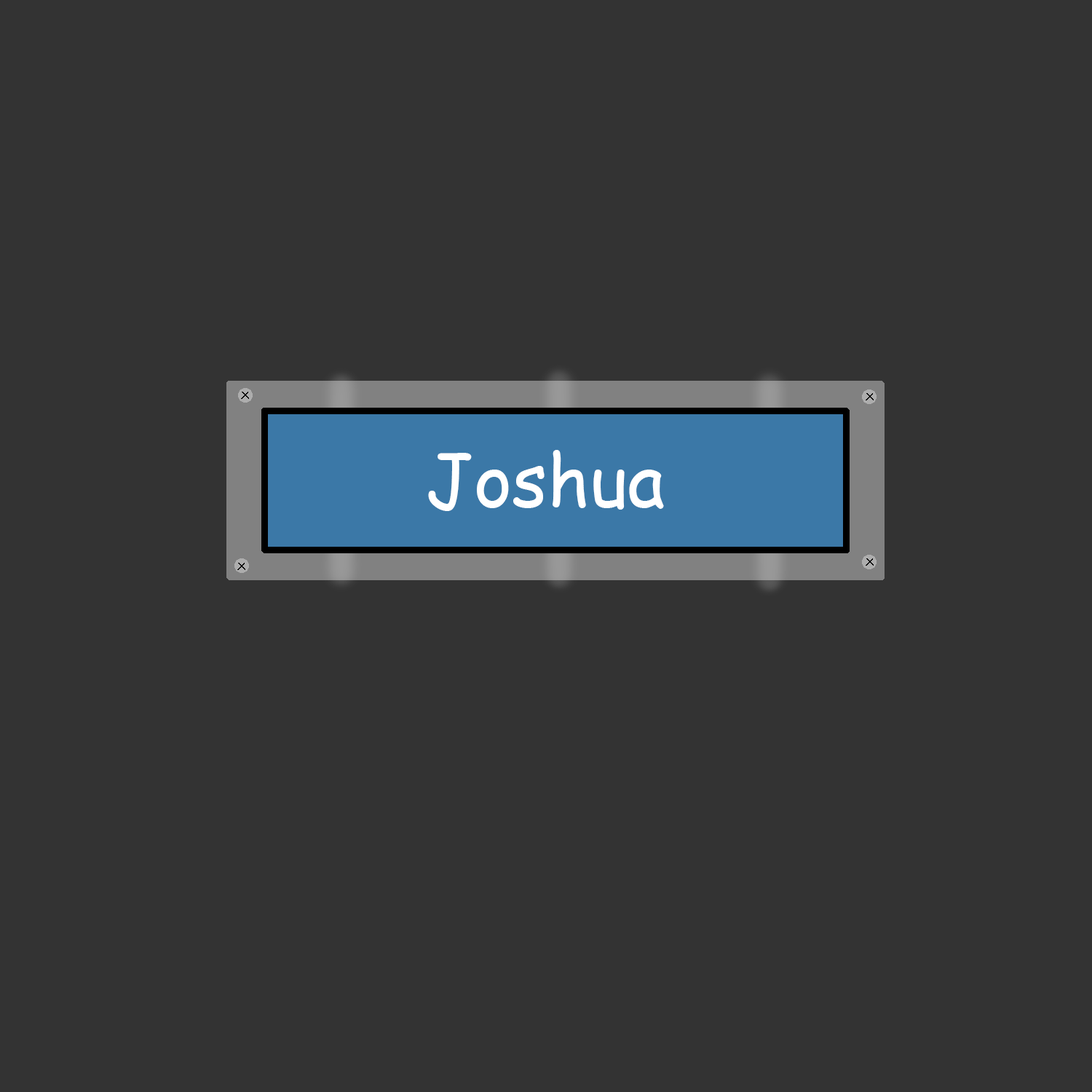
<style>
.page{position:relative;width:1092px;height:1092px;background:#333333}
.page>*{position:absolute;margin:0}
.t1{font:72.8px "ComicSansMS";color:#ffffff}
</style>
<div class="page">
<p class="t1" style="left:428px;top:450px;width:236px;height:61px">Joshua</p>
</div>
